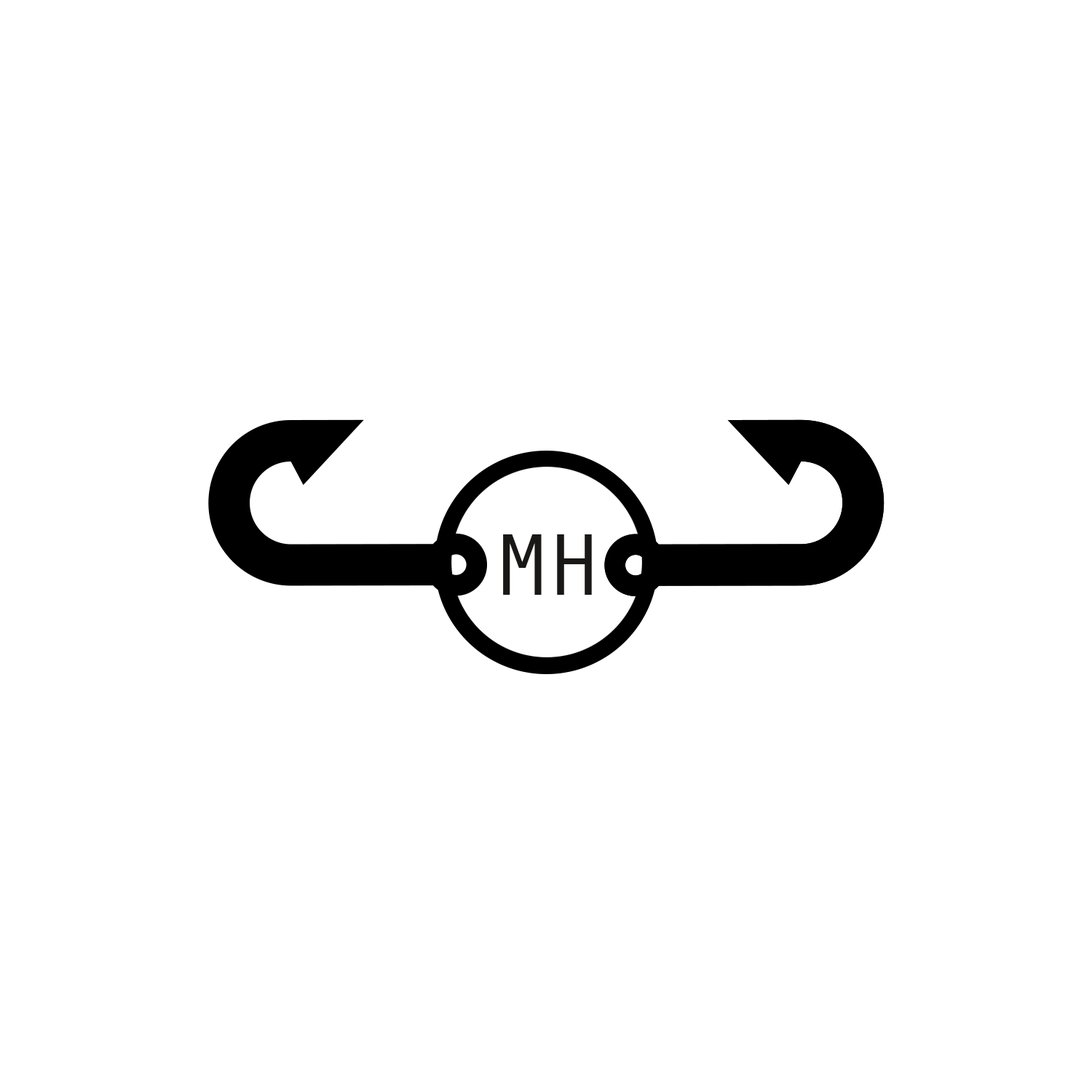
<style>
.page{position:relative;width:1092px;height:1092px;background:#ffffff}
.page>*{position:absolute;margin:0}
.t1{font:87.4px "AndaleMono";color:#1a1717}
</style>
<div class="page">
<p class="t1" style="left:503px;top:534px;width:89px;height:61px">MH</p>
</div>
